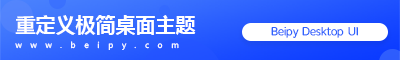
<style>
.page{position:relative;width:400px;height:60px}
.page>*{position:absolute;margin:0}
.t1{font:20px "MicrosoftYaHei-Bold";color:#ffffff}
.t2{font:11.3px "HYZhengYuan-DES";color:#2f63fd}
.t3{font:8px "MicrosoftYaHei";letter-spacing:1.08em;color:#ffffff}
</style>
<div class="page">
<p class="t1" style="left:15px;top:15px;width:181px;height:20px">重定义极简桌面主题</p>
<p class="t2" style="left:271px;top:27px;width:87px;height:11px">Beipy Desktop UI</p>
<p class="t3" style="left:15px;top:41px;width:164px;height:9px">www.beipy.com</p>
</div>
